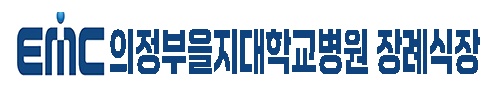
<style>
.page{position:relative;width:500px;height:100px;background:#ffffff}
.page>*{position:absolute;margin:0}
.t1{font:48px "JalnanGothicTTF";color:#0f437e;scale:0.54 1}
</style>
<div class="page">
<p class="t1" style="left:110px;top:29px;width:370px;height:45px">의정부을지대학교병원 장례식장</p>
</div>
